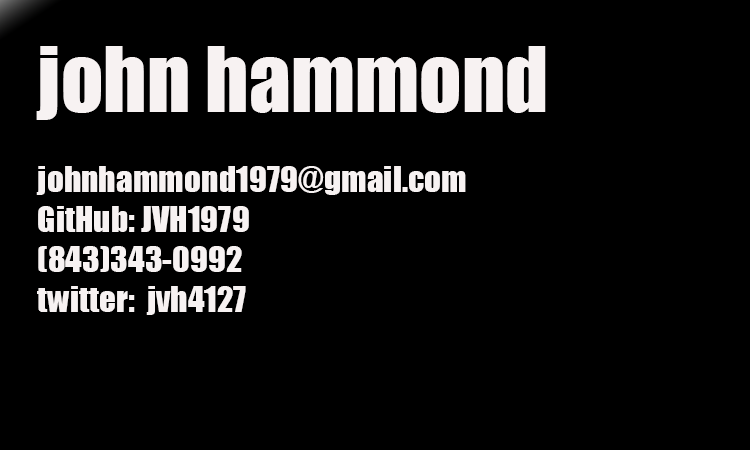
<style>
.page{position:relative;width:750px;height:450px;background:#000000}
.page>*{position:absolute;margin:0}
.t1{font:33.3px "Impact";color:#f7f2f2}
.t2{font:83.3px "Impact";color:#f7f2f2}
</style>
<div class="page">
<p class="t1" style="left:36px;top:46px;width:510px;height:269px"><span class="t2">john hammond<br></span><br>johnhammond1979@gmail.com<br>GitHub: JVH1979<br>(843)343-0992<br>twitter:  jvh4127</p>
</div>
